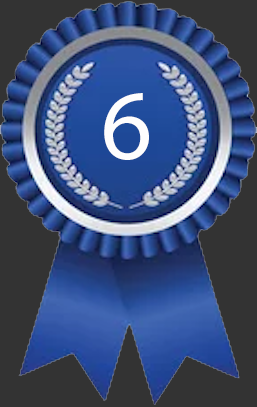
<style>
.page{position:relative;width:257px;height:407px;background:#333333}
.page>*{position:absolute;margin:0}
.t1{font:100px "MyriadPro-Regular";color:#fefdfd}
</style>
<div class="page">
<p class="t1" style="left:104px;top:93px;width:45px;height:67px">6</p>
</div>
